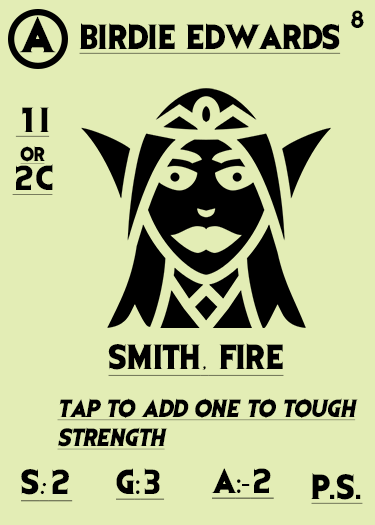
<style>
.page{position:relative;width:375px;height:525px;background:#e3edb5}
.page>*{position:absolute;margin:0}
.t1{font:41.7px "EvilDead";letter-spacing:-0.05em;color:#000000}
.t2{font:20.8px "EvilDead";letter-spacing:-0.05em;color:#000000}
.t3{font:29.2px "EvilDead";color:#000000;text-decoration:underline}
.t4{font:29.2px/29.2px "EvilDead";color:#000000;text-decoration:underline}
.t5{font:16.7px/29.2px "EvilDead";color:#000000;text-decoration:underline}
.t6{font:29.2px "Fadli-Script";color:#000000;text-decoration:underline}
.t7{font:20.8px/29.2px "EvilDead";color:#000000;font-style:italic;text-decoration:underline}
.t8{font:29.2px "MyriadPro-Regular";color:#000000;text-decoration:underline}
</style>
<div class="page">
<p class="t1" style="left:19px;top:16px;width:37px;height:37px">A</p>
<p class="t2" style="left:350px;top:10px;width:14px;height:18px">8</p>
<p class="t3" style="left:79px;top:23px;width:262px;height:31px">BIRDIE EDWARDS</p>
<p class="t4" style="left:12px;top:107px;width:41px;height:88px;text-align:center">1I<br><span class="t5">or<br></span>2C</p>
<p class="t3" style="left:108px;top:343px;width:176px;height:33px">SMITH<span class="t6">,</span> FIRE</p>
<p class="t7" style="left:57px;top:398px;width:301px;height:52px">Tap to add one to tough<br>strength</p>
<p class="t3" style="left:21px;top:469px;width:52px;height:33px">S<span class="t6">:</span>2</p>
<p class="t3" style="left:116px;top:468px;width:49px;height:32px">G<span class="t8">:</span>3</p>
<p class="t8" style="left:211px;top:468px;width:63px;height:31px"><span class="t3">A</span>:-<span class="t3">2</span></p>
<p class="t3" style="left:311px;top:473px;width:52px;height:31px">P.S.</p>
</div>
